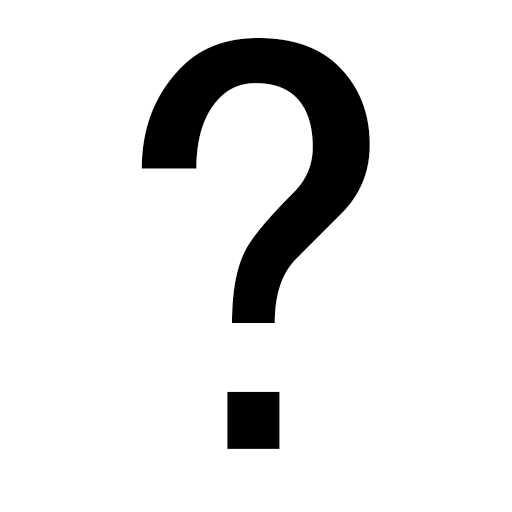
<style>
.page{position:relative;width:512px;height:512px;background:#ffffff}
.page>*{position:absolute;margin:0}
.t1{font:608.2px "MS-PGothic";color:#000000}
</style>
<div class="page">
<p class="t1" style="left:141px;top:37px;width:229px;height:412px">?</p>
</div>
